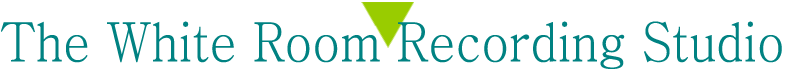
<style>
.page{position:relative;width:794px;height:71px;background:#ffffff}
.page>*{position:absolute;margin:0}
.t1{font:54px "Batang";color:#008282;scale:0.88 1}
</style>
<div class="page">
<p class="t1" style="left:1px;top:21px;width:781px;height:48px">The White Room Recording Studio</p>
</div>
